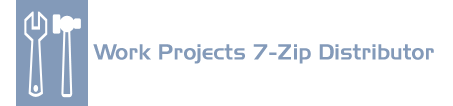
<style>
.page{position:relative;width:453px;height:106px;background:#ffffff}
.page>*{position:absolute;margin:0}
.t1{font:22px "Slicker";color:#839ab9}
</style>
<div class="page">
<p class="t1" style="left:93px;top:44px;width:341px;height:20px">Work Projects 7-Zip Distributor</p>
</div>
